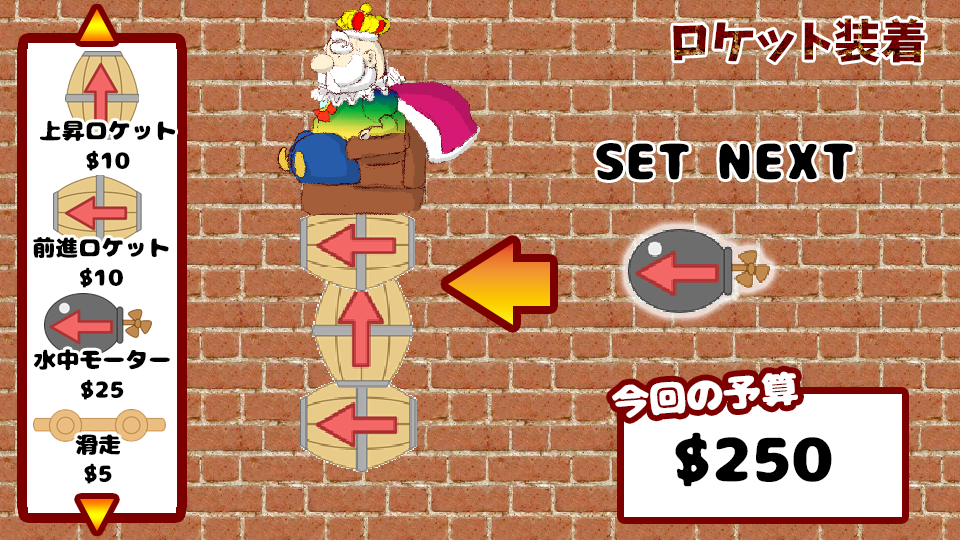
<style>
.page{position:relative;width:960px;height:540px}
.page>*{position:absolute;margin:0}
.t1{font:46.1px "Keifont"}
.t2{font:23px/29.8px "07NikumaruFont";color:#000000}
.t3{font:50.8px "07NikumaruFont";color:#000000}
.t4{font:37.4px "07NikumaruFont";color:#ffffff}
.t5{font:61.7px "07NikumaruFont";color:#000000}
</style>
<div class="page">
<p class="t1" style="left:673px;top:18px;width:252px;height:45px">ロケット装着</p>
<p class="t2" style="left:39px;top:120px;width:137px;height:51px;text-align:center">上昇ロケット<br>$10</p>
<p class="t3" style="left:596px;top:143px;width:257px;height:37px">SET NEXT</p>
<p class="t2" style="left:33px;top:237px;width:136px;height:51px;text-align:center">前進ロケット<br>$10</p>
<p class="t2" style="left:34px;top:349px;width:136px;height:51px;text-align:center">水中モーター<br>$25</p>
<p class="t4" style="left:612px;top:371px;width:186px;height:47px;rotate:-4deg">今回の予算</p>
<p class="t2" style="left:75px;top:434px;width:46px;height:50px;text-align:center">滑走<br>$5</p>
<p class="t5" style="left:675px;top:432px;width:157px;height:55px">$250</p>
</div>
